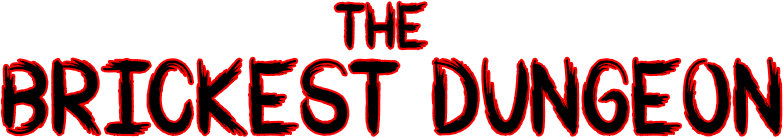
<style>
.page{position:relative;width:783px;height:137px;background:#ffffff}
.page>*{position:absolute;margin:0}
.t1{font:61.5px "WARBRUSH";color:#000000}
.t2{font:102.1px "WARBRUSH";color:#000000}
</style>
<div class="page">
<p class="t1" style="left:335px;top:2px;width:92px;height:47px">THE</p>
<p class="t2" style="left:2px;top:58px;width:779px;height:77px"><span class="t1"> <br></span>BRICKEST DUNGEON</p>
</div>
